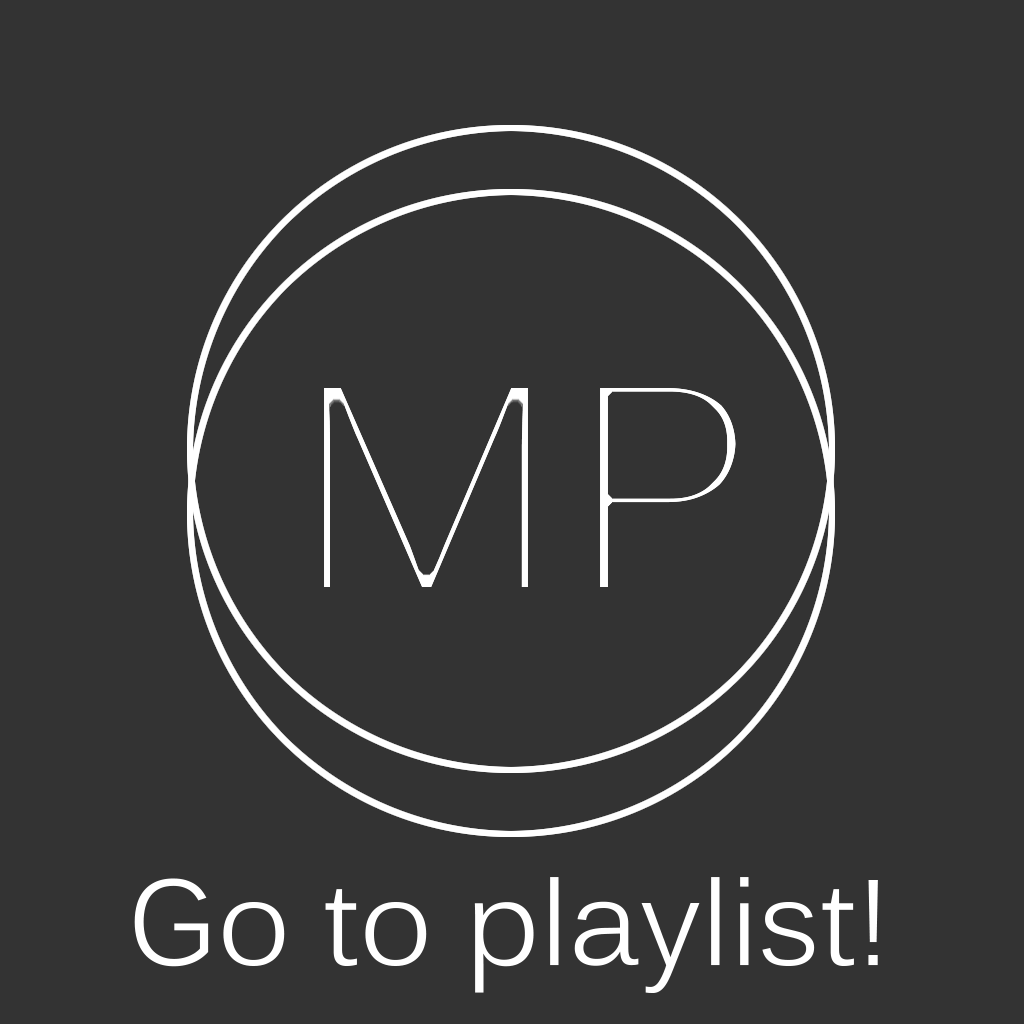
<style>
.page{position:relative;width:1024px;height:1024px;background:#333333}
.page>*{position:absolute;margin:0}
.t1{font:120px "Kalinga";color:#ffffff}
</style>
<div class="page">
<p class="t1" style="left:134px;top:877px;width:744px;height:116px">Go to playlist!</p>
</div>
